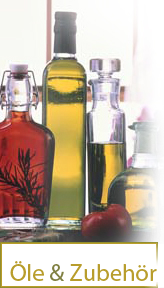
<style>
.page{position:relative;width:164px;height:288px}
.page>*{position:absolute;margin:0}
.t1{font:24px "Myriad-Roman";letter-spacing:0.005em;color:#b89d2c}
.t2{font:24px "Myriad-Roman";letter-spacing:0.005em;color:#808042}
</style>
<div class="page">
<p class="t1" style="left:10px;top:261px;width:147px;height:20px">Öle <span class="t2">&amp; </span>Zubehör</p>
</div>
